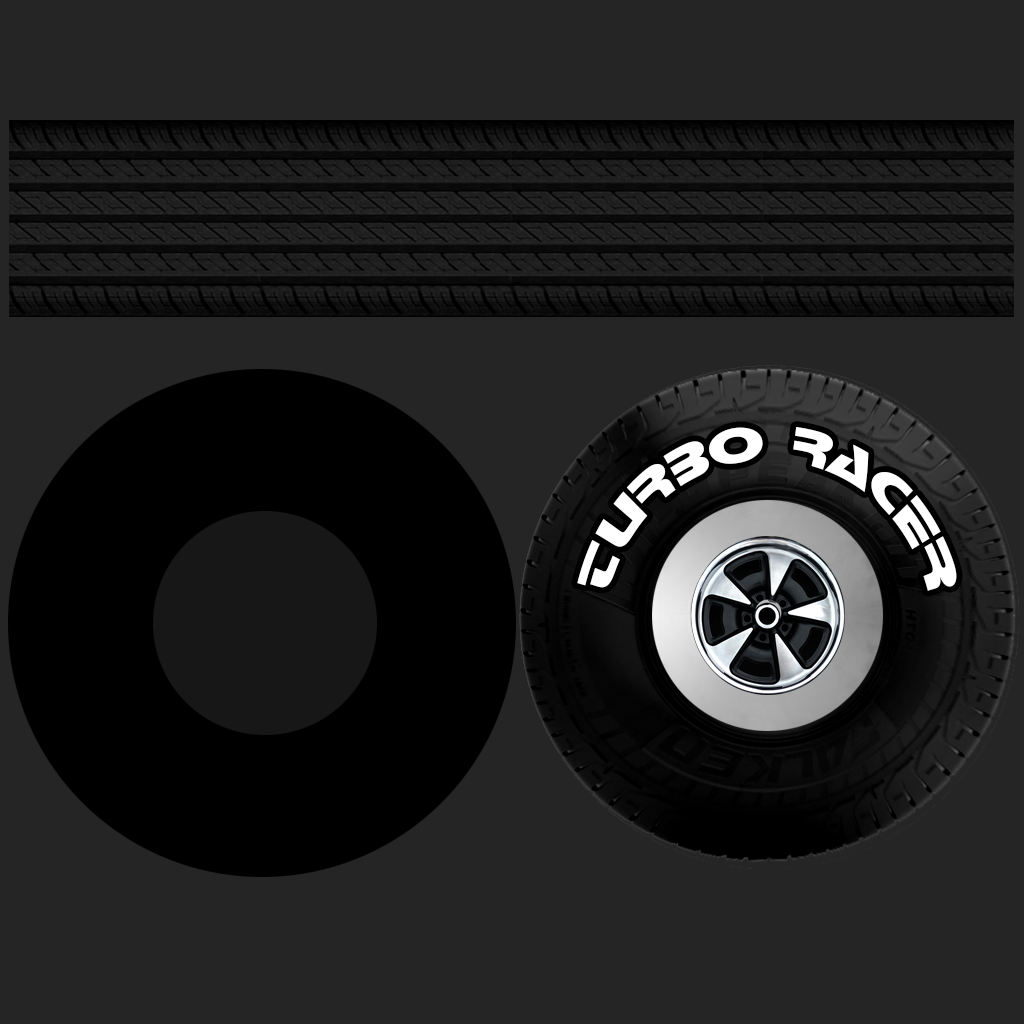
<style>
.page{position:relative;width:1024px;height:1024px;background:#252525}
.page>*{position:absolute;margin:0}
.t1{font:75.2px "StopD";color:#ffffff;font-variant:small-caps;scale:0.93 1}
</style>
<div class="page">
<p class="t1" style="left:577px;top:427px;width:380px;height:164px">turbo racer</p>
</div>
